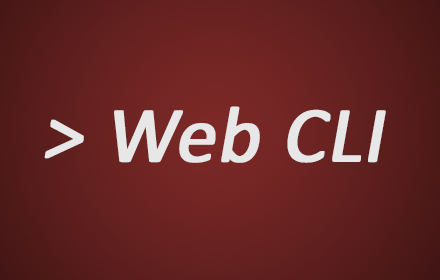
<style>
.page{position:relative;width:440px;height:280px}
.page>*{position:absolute;margin:0}
.t1{font:80px "Calibri";color:#e7e7e7;font-weight:bold;font-style:italic}
</style>
<div class="page">
<p class="t1" style="left:44px;top:106px;width:342px;height:57px">&gt; Web CLI</p>
</div>
